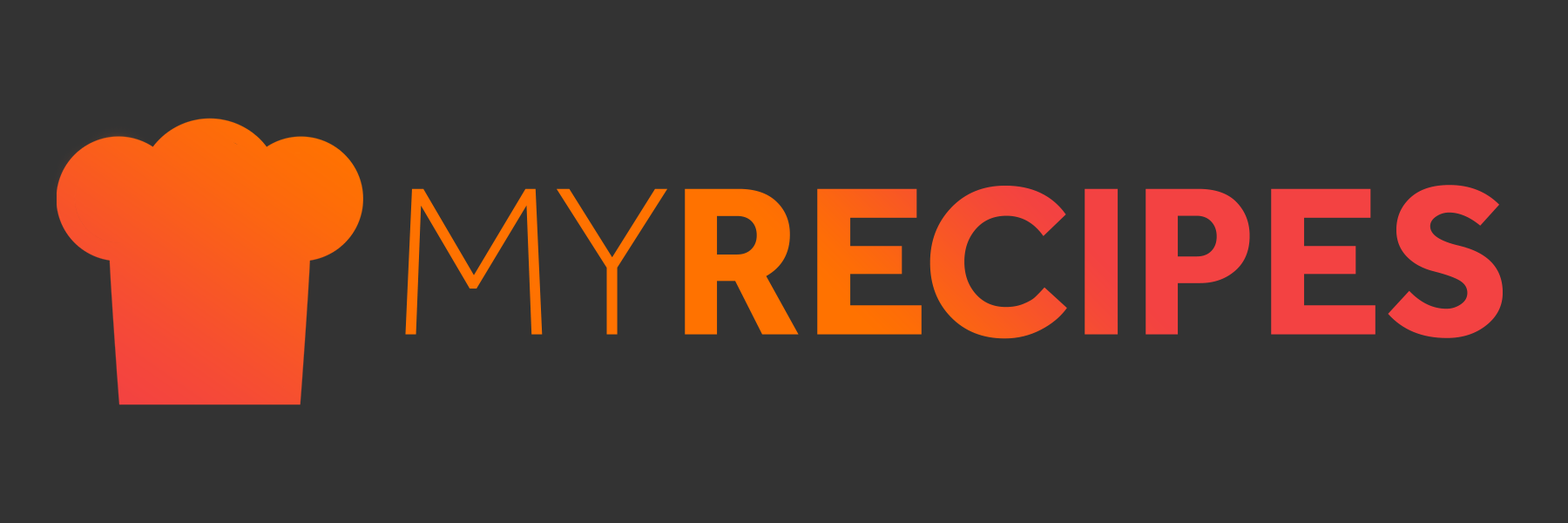
<style>
.page{position:relative;width:1568px;height:523px;background:#333333}
.page>*{position:absolute;margin:0}
.t1{font:217.8px "Effra-Bold"}
.t2{font:217.8px "Effra-Light"}
</style>
<div class="page">
<p class="t1" style="left:405px;top:185px;width:1098px;height:154px"><span class="t2">MY</span>RECIPES</p>
</div>
